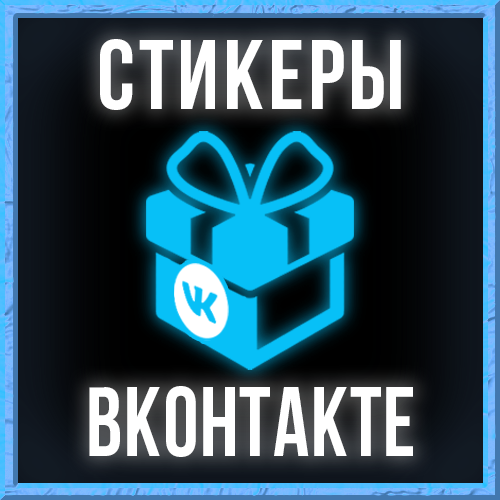
<style>
.page{position:relative;width:500px;height:500px}
.page>*{position:absolute;margin:0}
.t1{font:98px "BebasNeueBold";letter-spacing:0.04em;color:#ffffff}
.t2{font:98px "BebasNeueBold";letter-spacing:0.02em;color:#ffffff;scale:0.91 1}
</style>
<div class="page">
<p class="t1" style="left:100px;top:39px;width:301px;height:71px">стикеры</p>
<p class="t2" style="left:89px;top:386px;width:324px;height:71px">вконтакте</p>
</div>
